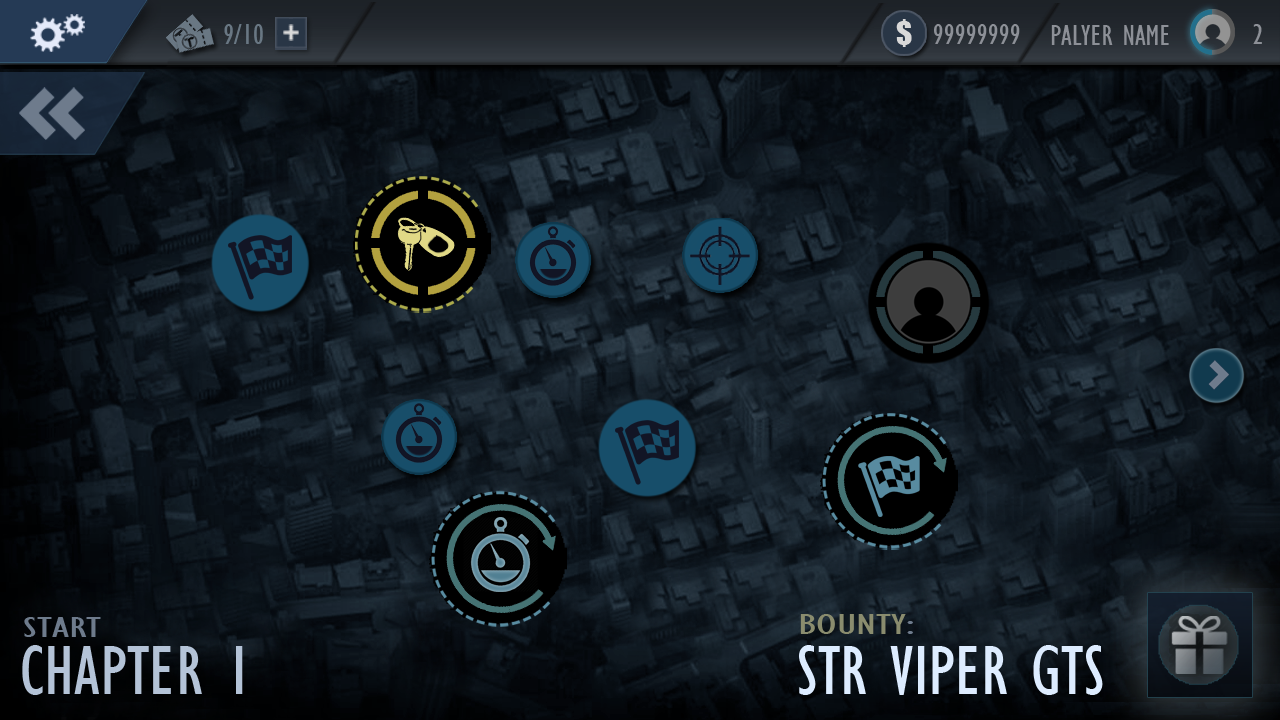
<style>
.page{position:relative;width:1280px;height:720px}
.page>*{position:absolute;margin:0}
.t1{font:29.6px "GillSansMT-Condensed";color:#6e7b8c;scale:1.62 1}
.t2{font:29.6px "GillSansMT-Condensed";color:#8a8c6e;scale:1.62 1}
.t3{font:72px "GillSansMT-Condensed";color:#b4c3d7}
.t4{font:72px "GillSansMT-Condensed";color:#ddecff}
</style>
<div class="page">
<p class="t1" style="left:24px;top:617px;width:77px;height:20px">START</p>
<p class="t2" style="left:800px;top:614px;width:113px;height:20px">BOUNTY<span class="t1">:</span></p>
<p class="t3" style="left:22px;top:645px;width:221px;height:50px">CHAPTER 1</p>
<p class="t4" style="left:799px;top:645px;width:304px;height:50px">STR VIPER GTS</p>
</div>
